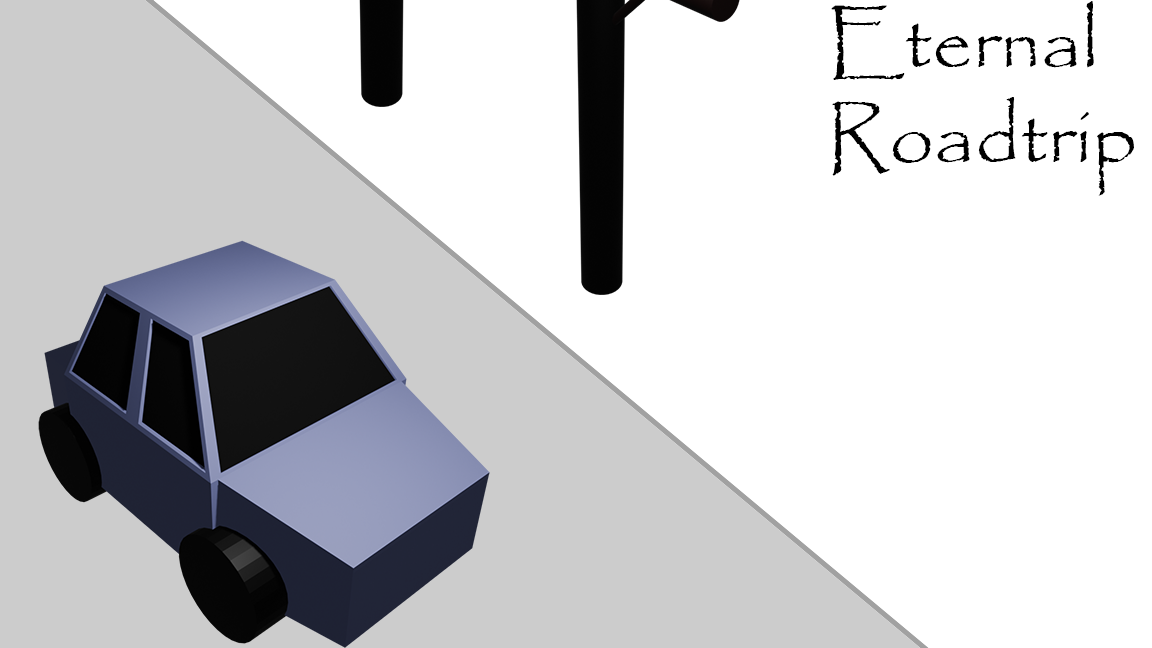
<style>
.page{position:relative;width:1152px;height:648px;background:#ffffff}
.page>*{position:absolute;margin:0}
.t1{font:80px "Papyrus-Regular";color:#000000}
</style>
<div class="page">
<p class="t1" style="left:831px;top:1px;width:303px;height:195px">Eternal<br>Roadtrip</p>
</div>
